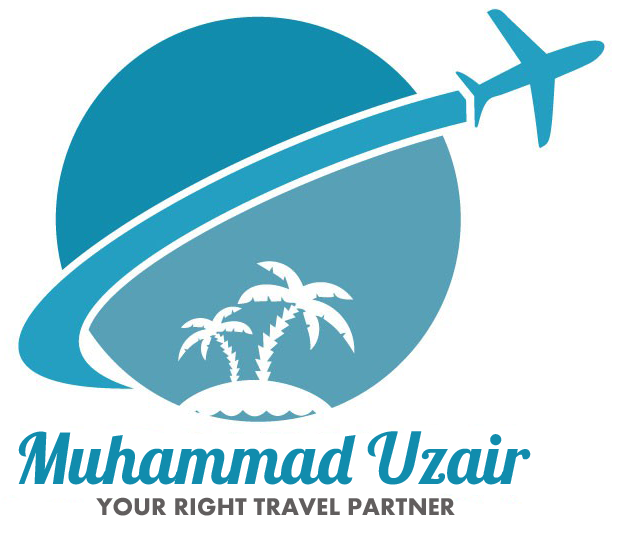
<style>
.page{position:relative;width:624px;height:540px;background:#ffffff}
.page>*{position:absolute;margin:0}
.t1{font:70px "Lobster-Regular";color:#118cad}
.t2{font:25px "Aharoni-Bold";color:#615e5e}
</style>
<div class="page">
<p class="t1" style="left:18px;top:431px;width:513px;height:54px">Muhammad Uzair</p>
<p class="t2" style="left:96px;top:497px;width:359px;height:19px">YOUR RIGHT TRAVEL PARTNER</p>
</div>
